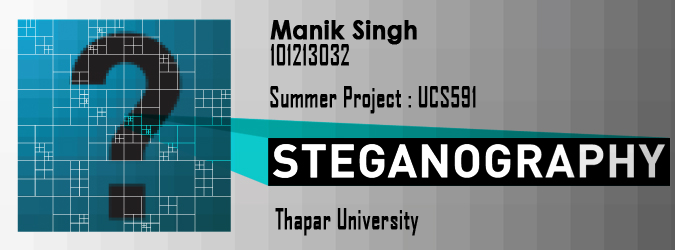
<style>
.page{position:relative;width:675px;height:250px}
.page>*{position:absolute;margin:0}
.t1{font:27.1px "CenturyGothic-Bold";color:#000000;font-weight:bold;scale:0.88 1}
.t2{font:27.1px "AgencyFB-Reg";color:#000000;font-weight:bold;scale:0.88 1}
</style>
<div class="page">
<p class="t1" style="left:270px;top:20px;width:147px;height:25px">Manik Singh</p>
<p class="t2" style="left:270px;top:44px;width:79px;height:22px">101213032</p>
<p class="t2" style="left:270px;top:86px;width:206px;height:28px">Summer Project : UCS591</p>
<p class="t2" style="left:275px;top:208px;width:144px;height:28px">Thapar University</p>
</div>
